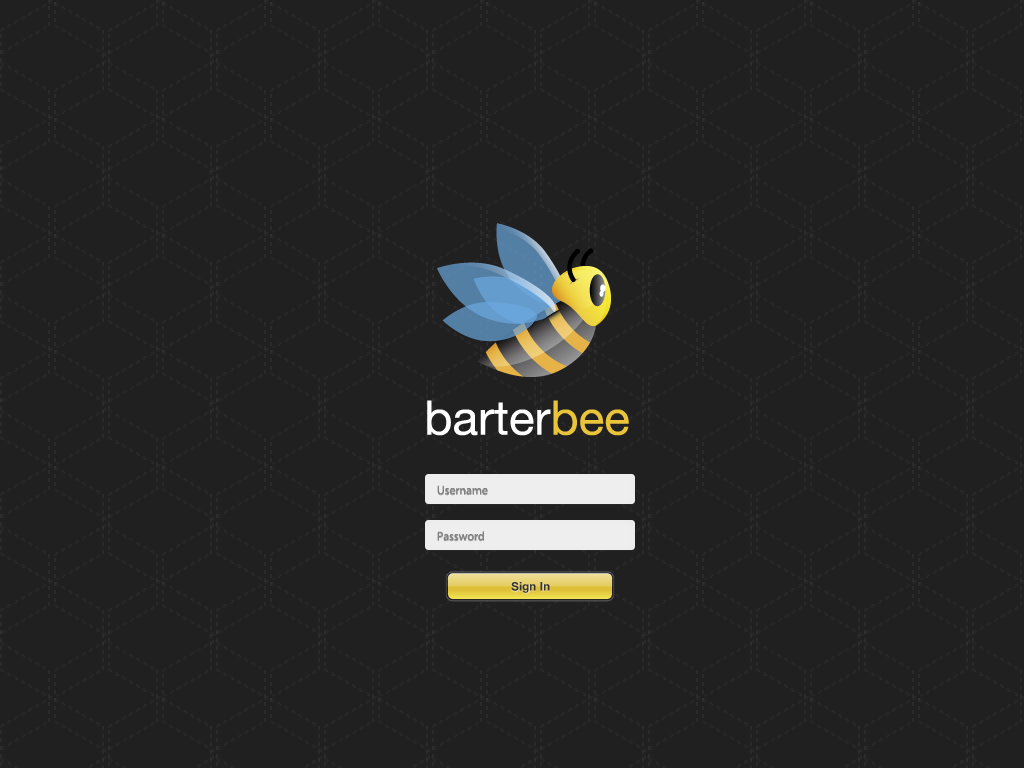
<style>
.page{position:relative;width:1024px;height:768px;background:#202020}
.page>*{position:absolute;margin:0}
.t1{font:47.6px "HelveticaNeue";color:#ffffff}
.t2{font:47.6px "HelveticaNeue";color:#e9c43b}
.t3{font:12px "MyriadPro-Regular";color:#808080}
</style>
<div class="page">
<p class="t1" style="left:427px;top:400px;width:202px;height:36px">barter<span class="t2">bee</span></p>
<p class="t3" style="left:437px;top:485px;width:51px;height:10px">Username</p>
<p class="t3" style="left:437px;top:531px;width:47px;height:10px">Password</p>
</div>
